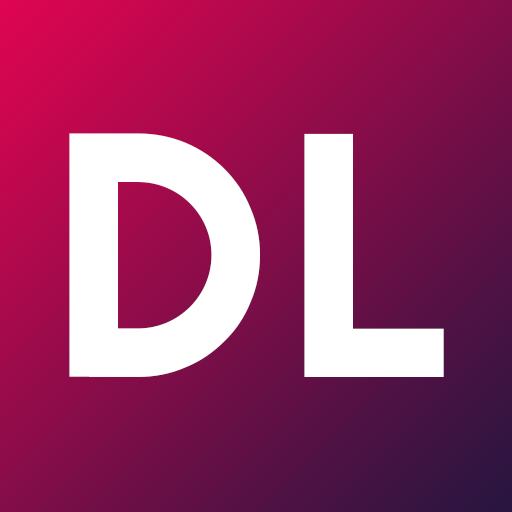
<style>
.page{position:relative;width:512px;height:512px}
.page>*{position:absolute;margin:0}
.t1{font:347.2px "Jaapokki-Regular";color:#ffffff}
</style>
<div class="page">
<p class="t1" style="left:69px;top:133px;width:375px;height:244px">DL</p>
</div>
